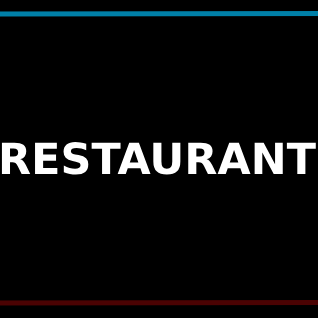
<style>
.page{position:relative;width:318px;height:318px;background:#000000}
.page>*{position:absolute;margin:0}
.t1{font:43px "DejaVuSans-Bold";color:#ffffff}
</style>
<div class="page">
<p class="t1" style="left:1px;top:142px;width:315px;height:33px">RESTAURANT</p>
</div>
